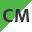
<style>
.page{position:relative;width:32px;height:32px;background:#51b848}
.page>*{position:absolute;margin:0}
.t1{font:20px "EkMukta-Bold";color:#333333}
</style>
<div class="page">
<p class="t1" style="left:3px;top:9px;width:27px;height:13px">CM</p>
</div>
